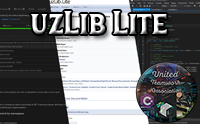
<style>
.page{position:relative;width:200px;height:124px}
.page>*{position:absolute;margin:0}
.t1{font:30px "HanleyPro-Block"}
</style>
<div class="page">
<p class="t1" style="left:31px;top:11px;width:136px;height:23px">uzLib Lite</p>
</div>
